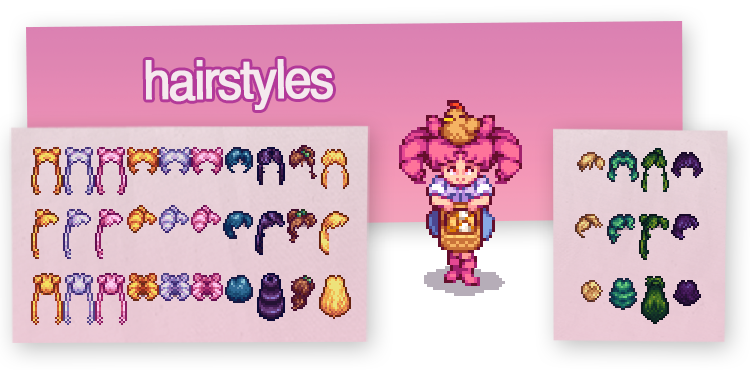
<style>
.page{position:relative;width:750px;height:370px}
.page>*{position:absolute;margin:0}
.t1{font:54px "Helvetica";letter-spacing:-0.06em;color:#f5e9ee;font-weight:bold;scale:0.9 1}
</style>
<div class="page">
<p class="t1" style="left:145px;top:59px;width:188px;height:51px;rotate:-1deg">hairstyles</p>
</div>
